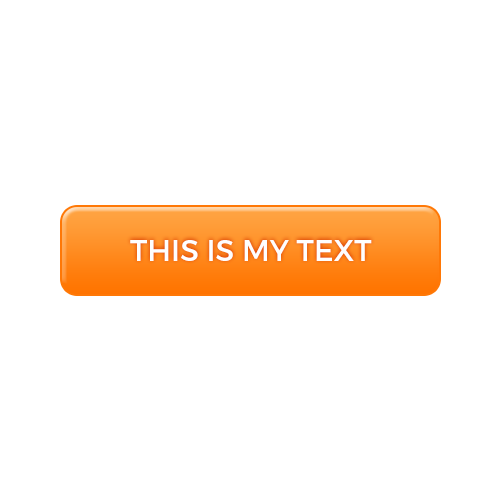
<style>
.page{position:relative;width:500px;height:500px;background:#ffffff}
.page>*{position:absolute;margin:0}
.t1{font:30px "Montserrat-Regular";color:#fefefe;text-transform:uppercase}
</style>
<div class="page">
<p class="t1" style="left:130px;top:240px;width:242px;height:21px">This is my text</p>
</div>
